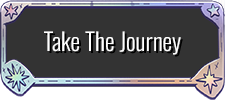
<style>
.page{position:relative;width:225px;height:100px;background:#333333}
.page>*{position:absolute;margin:0}
.t1{font:24px "Oswald-Light";color:#ffffff}
</style>
<div class="page">
<p class="t1" style="left:44px;top:31px;width:137px;height:24px">Take The Journey</p>
</div>
